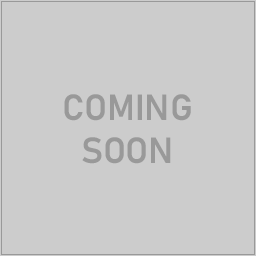
<style>
.page{position:relative;width:256px;height:256px;background:#cccccc}
.page>*{position:absolute;margin:0}
.t1{font:36px "Bahnschrift-SemiBold";color:#999999}
</style>
<div class="page">
<p class="t1" style="left:64px;top:94px;width:127px;height:70px;text-align:center">COMING<br>SOON</p>
</div>
